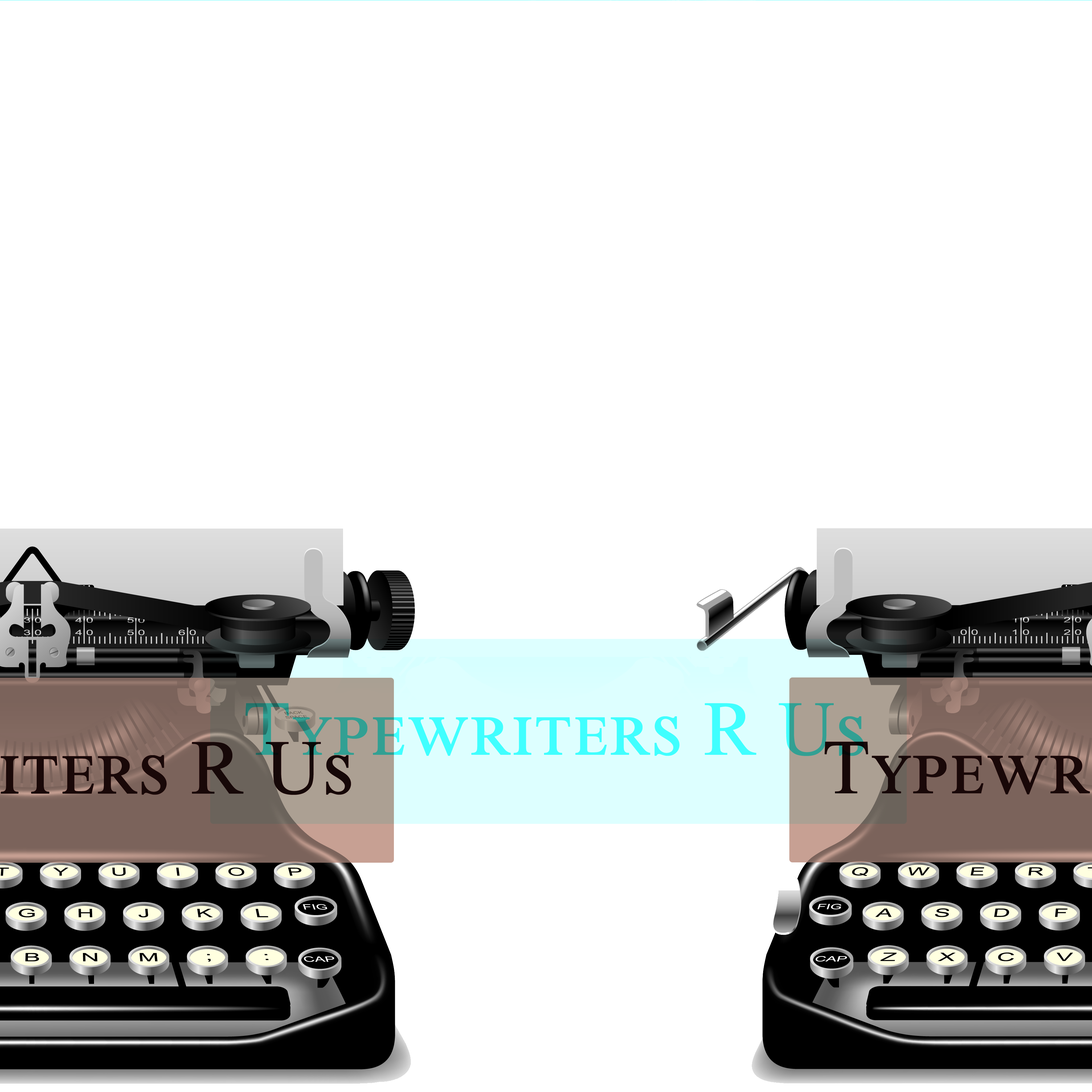
<style>
.page{position:relative;width:1092px;height:1092px;background:#ffffff}
.page>*{position:absolute;margin:0}
.t1{font:77.1px "TimesNewRomanPSMT";font-variant:small-caps;font-weight:bold}
</style>
<div class="page">
<p class="t1" style="left:245px;top:703px;width:619px;height:53px">Typewriters R Us</p>
</div>
